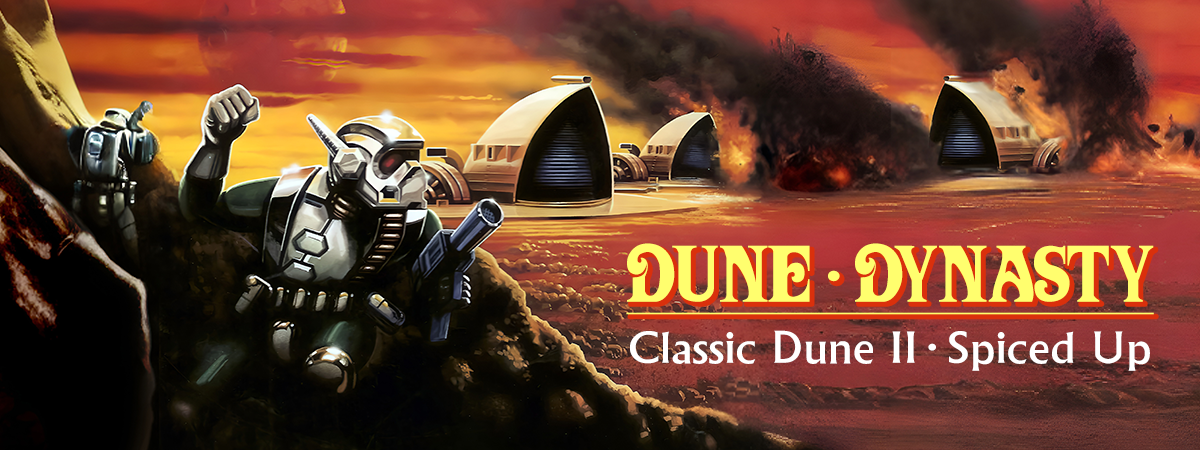
<style>
.page{position:relative;width:1200px;height:450px}
.page>*{position:absolute;margin:0}
.t1{font:70px "OrthodoxHerbertarian";color:#fffe6e;text-decoration:underline}
.t2{font:70px "OrthodoxHerbertarian";letter-spacing:-0.04em;color:#fffe6e;text-decoration:underline}
.t3{font:70px "Dune2k";letter-spacing:-0.16em;color:#fffe6e}
.t4{font:46px "Dune2k";color:#ffffff}
.t5{font:46px "Dune2k";letter-spacing:-0.16em;color:#ffffff}
</style>
<div class="page">
<p class="t1" style="left:626px;top:243px;width:528px;height:72px">DUN<span class="t2">E  </span>DYNASTY</p>
<p class="t3" style="left:828px;top:270px;width:12px;height:12px">·</p>
<p class="t4" style="left:630px;top:330px;width:520px;height:41px">Classic Dune II<span class="t5"> ·</span> Spiced Up</p>
</div>
